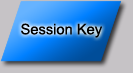
<style>
.page{position:relative;width:133px;height:73px;background:#c6c3c6}
.page>*{position:absolute;margin:0}
.t1{font:14.7px "ArialMT";color:#000000}
</style>
<div class="page">
<p class="t1" style="left:21px;top:23px;width:81px;height:15px">Session Key</p>
</div>
